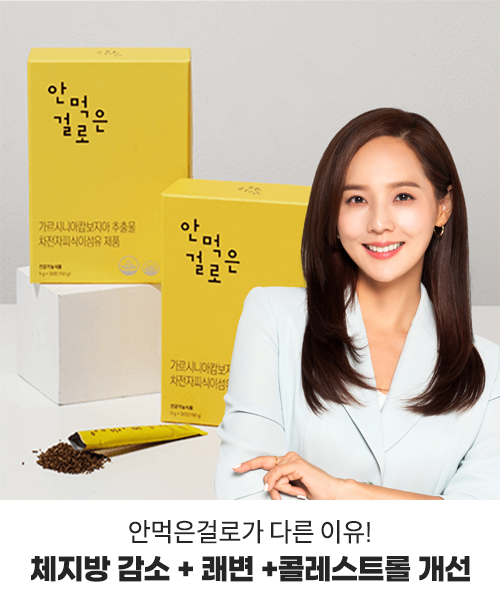
<style>
.page{position:relative;width:500px;height:600px}
.page>*{position:absolute;margin:0}
.t1{font:26px "SpoqaHanSansNeo-Regular";letter-spacing:-0.02em;color:#252525;scale:0.97 1}
.t2{font:29.5px "GmarketSansTTFBold";letter-spacing:-0.03em;color:#252525;scale:0.97 1}
</style>
<div class="page">
<p class="t1" style="left:129px;top:520px;width:241px;height:24px">안먹은걸로가 다른 이유!</p>
<p class="t2" style="left:31px;top:556px;width:439px;height:26px">체지방 감소 + 쾌변 +콜레스트롤 개선</p>
</div>
